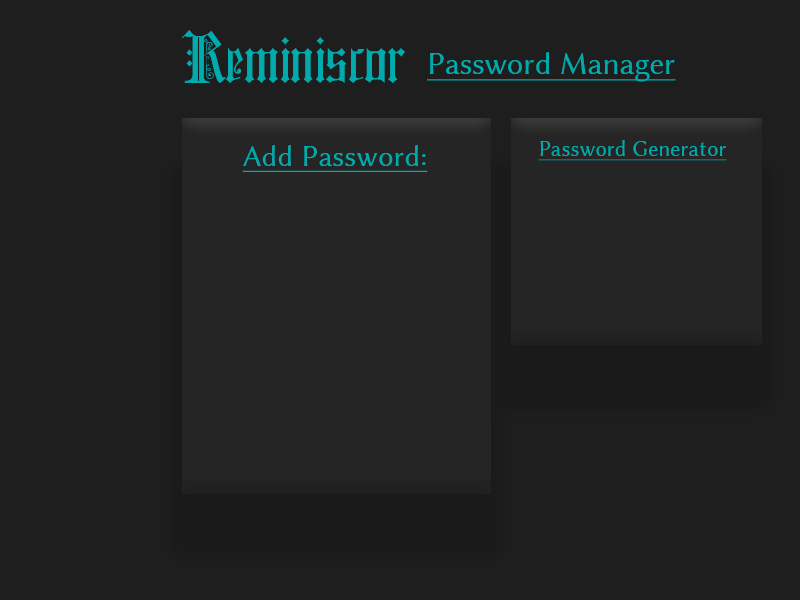
<style>
.page{position:relative;width:800px;height:600px;background:#1e1e1e}
.page>*{position:absolute;margin:0}
.t1{font:18px "LinuxBiolinumG";color:#1e1e1e}
.t2{font:72px "ColchesterBlack";color:#00abae}
.t3{font:31.8px "LinuxBiolinumG";color:#00abae;text-decoration:underline}
.t4{font:30px "LinuxBiolinumG";color:#00abae;text-decoration:underline}
.t5{font:22px "LinuxBiolinumG";color:#00abae;text-decoration:underline}
</style>
<div class="page">
<p class="t1" style="left:182px;top:30px;width:229px;height:53px"><span class="t2">Reminiscor</span>r incididunt ut labore et dolore magna aliqua. Quis ipsum suspendisse ultrices gravida. Risus commodo viverra maecenas accumsan lacus vel facilisis.</p>
<p class="t3" style="left:427px;top:52px;width:249px;height:30px">Password Manager</p>
<p class="t4" style="left:242px;top:145px;width:186px;height:27px">Add Password:</p>
<p class="t5" style="left:538px;top:140px;width:189px;height:21px">Password Generator</p>
</div>
